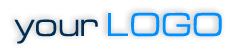
<style>
.page{position:relative;width:252px;height:52px;background:#ffffff}
.page>*{position:absolute;margin:0}
.t1{font:32.5px "BrinkExtended";letter-spacing:-0.03em;color:#002d51}
.t2{font:32.5px "BrinkExtended";letter-spacing:-0.03em;color:#0090ff}
</style>
<div class="page">
<p class="t1" style="left:14px;top:12px;width:208px;height:32px">your <span class="t2">LOGO</span></p>
</div>
